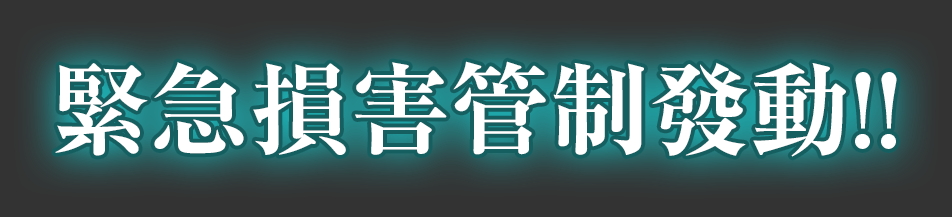
<style>
.page{position:relative;width:952px;height:217px;background:#333333}
.page>*{position:absolute;margin:0}
.t1{font:100px "RyuminPr6N-ExBold";color:#ffffff}
</style>
<div class="page">
<p class="t1" style="left:55px;top:61px;width:842px;height:96px">緊急損害管制發動!!</p>
</div>
